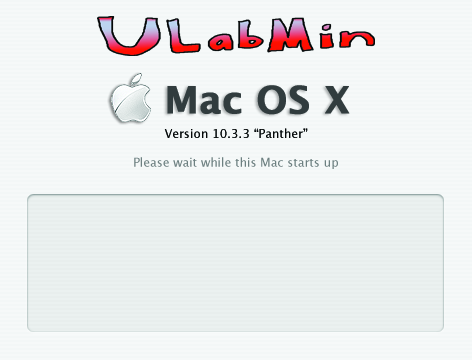
<style>
.page{position:relative;width:472px;height:360px;background:#f3f7f7}
.page>*{position:absolute;margin:0}
.t1{font:37.5px "LucidaGrande-Bold";color:#313c3e;font-weight:bold}
.t2{font:12px "LucidaGrande";color:#6d8081}
.t3{font:12px "LucidaGrande";color:#060808}
</style>
<div class="page">
<p class="t1" style="left:167px;top:85px;width:183px;height:30px">Mac OS X</p>
<p class="t2" style="left:134px;top:128px;width:204px;height:41px;text-align:center"><span class="t3">Version 10.3.3 “Panther”<br><br></span>Please wait while this Mac starts up</p>
</div>
